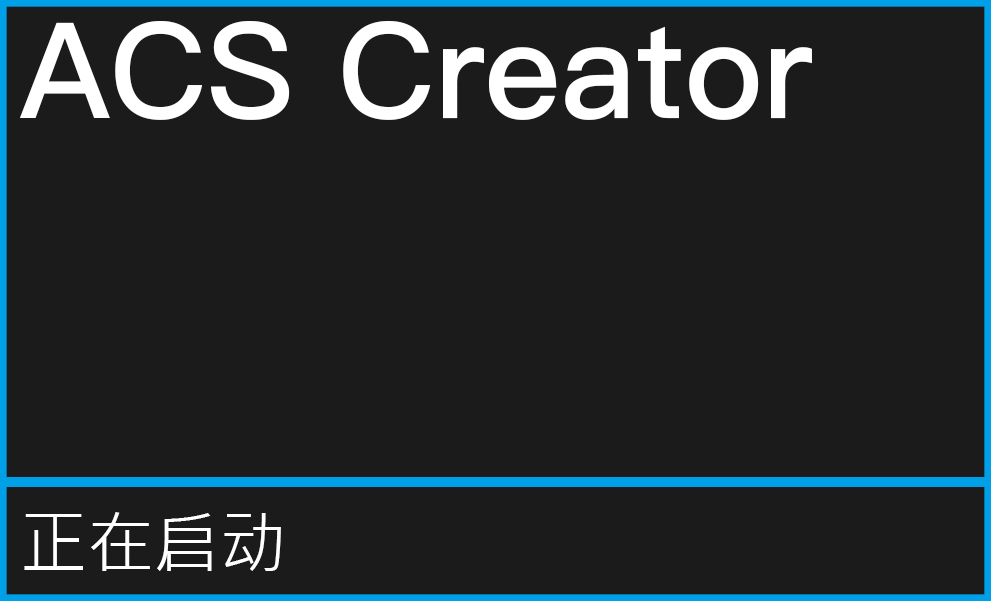
<style>
.page{position:relative;width:991px;height:601px;background:#1b1b1b}
.page>*{position:absolute;margin:0}
.t1{font:133.2px "PingFang-SC-Bold";color:#ffffff}
.t2{font:66.6px "MicrosoftJhengHeiRegular";color:#ffffff}
</style>
<div class="page">
<p class="t1" style="left:20px;top:21px;width:792px;height:99px">ACS Creator</p>
<p class="t2" style="left:24px;top:512px;width:257px;height:59px">正在启动</p>
</div>
